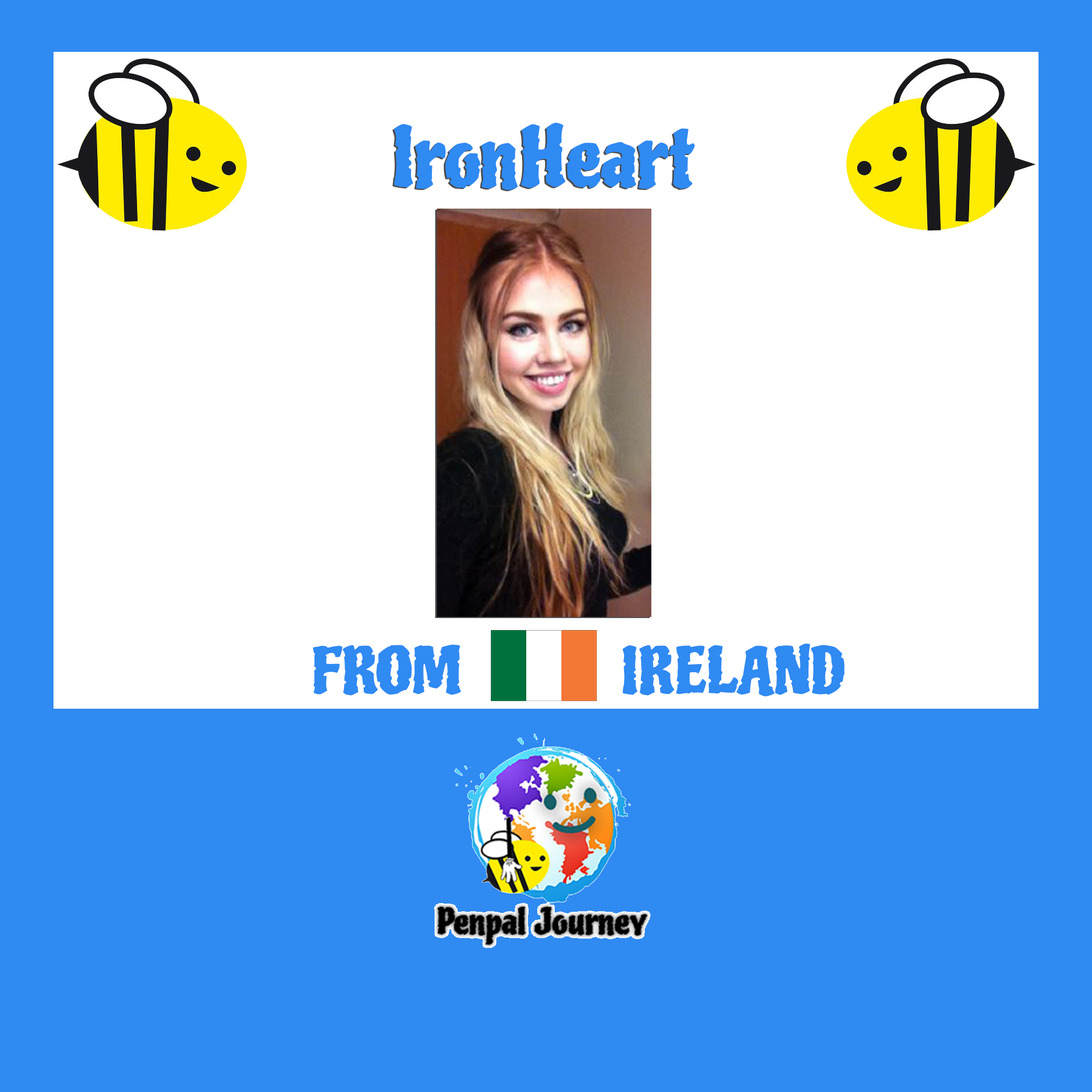
<style>
.page{position:relative;width:1092px;height:1092px;background:#2f8af2}
.page>*{position:absolute;margin:0}
.t1{font:79.9px "Piedra-Regular";color:#2f8af2}
.t2{font:62.2px "Piedra-Regular";color:#2f8af2}
</style>
<div class="page">
<p class="t1" style="left:394px;top:122px;width:301px;height:69px">IronHeart</p>
<p class="t2" style="left:313px;top:644px;width:148px;height:52px">FROM</p>
<p class="t2" style="left:622px;top:643px;width:223px;height:54px">IRELAND</p>
</div>
